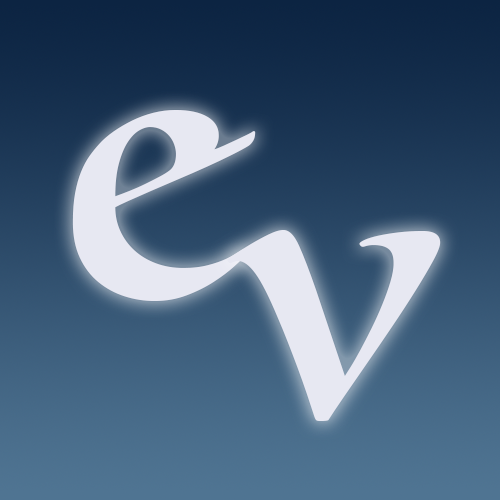
<style>
.page{position:relative;width:500px;height:500px}
.page>*{position:absolute;margin:0}
.t1{font:375px "Luminari-Regular";letter-spacing:0.08em;color:#e7e8f2}
</style>
<div class="page">
<p class="t1" style="left:72px;top:110px;width:184px;height:191px">e</p>
<p class="t1" style="left:227px;top:230px;width:214px;height:191px">v</p>
</div>
